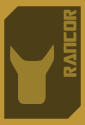
<style>
.page{position:relative;width:85px;height:125px;background:#4c3f17}
.page>*{position:absolute;margin:0}
.t1{font:20px "TransformersMovie";letter-spacing:0.04em;color:#997e2e}
.t2{font:20px "TransformersMovie";color:#997e2e}
</style>
<div class="page">
<p class="t1" style="left:63px;top:9px;width:14px;height:68px;rotate:-90deg"><span class="t2">Ra</span>nco<span class="t2">r</span></p>
</div>
